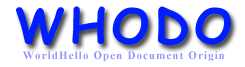
<style>
.page{position:relative;width:245px;height:67px;background:#ffffff}
.page>*{position:absolute;margin:0}
.t1{font:48px "ComicSansMS-Bold";letter-spacing:0.1em;color:#001eff}
.t2{font:11px "TimesNewRomanPS-BoldMT";letter-spacing:0.1em;color:#9696ff}
</style>
<div class="page">
<p class="t1" style="left:16px;top:6px;width:215px;height:40px">WHODO</p>
<p class="t2" style="left:23px;top:51px;width:202px;height:11px">WorldHello Open Document Origin</p>
</div>
